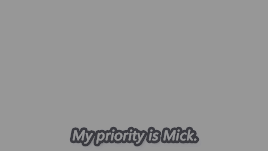
<style>
.page{position:relative;width:268px;height:151px;background:#979797}
.page>*{position:absolute;margin:0}
.t1{font:14px "SegoeUI";color:#979797;font-weight:bold;font-style:italic}
</style>
<div class="page">
<p class="t1" style="left:72px;top:129px;width:125px;height:15px">My priority is Mick.</p>
</div>
